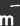
<style>
.page{position:relative;width:20px;height:26px;background:#333333}
.page>*{position:absolute;margin:0}
.t1{font:12px "DFKaiShu-SB-Estd-BF";color:#ffffff;font-weight:bold}
.t2{font:18px "ArialMT";color:#ffffff;font-weight:bold}
</style>
<div class="page">
<p class="t1" style="left:10px;top:4px;width:10px;height:3px">一</p>
<p class="t2" style="left:0px;top:15px;width:14px;height:11px">m</p>
</div>
